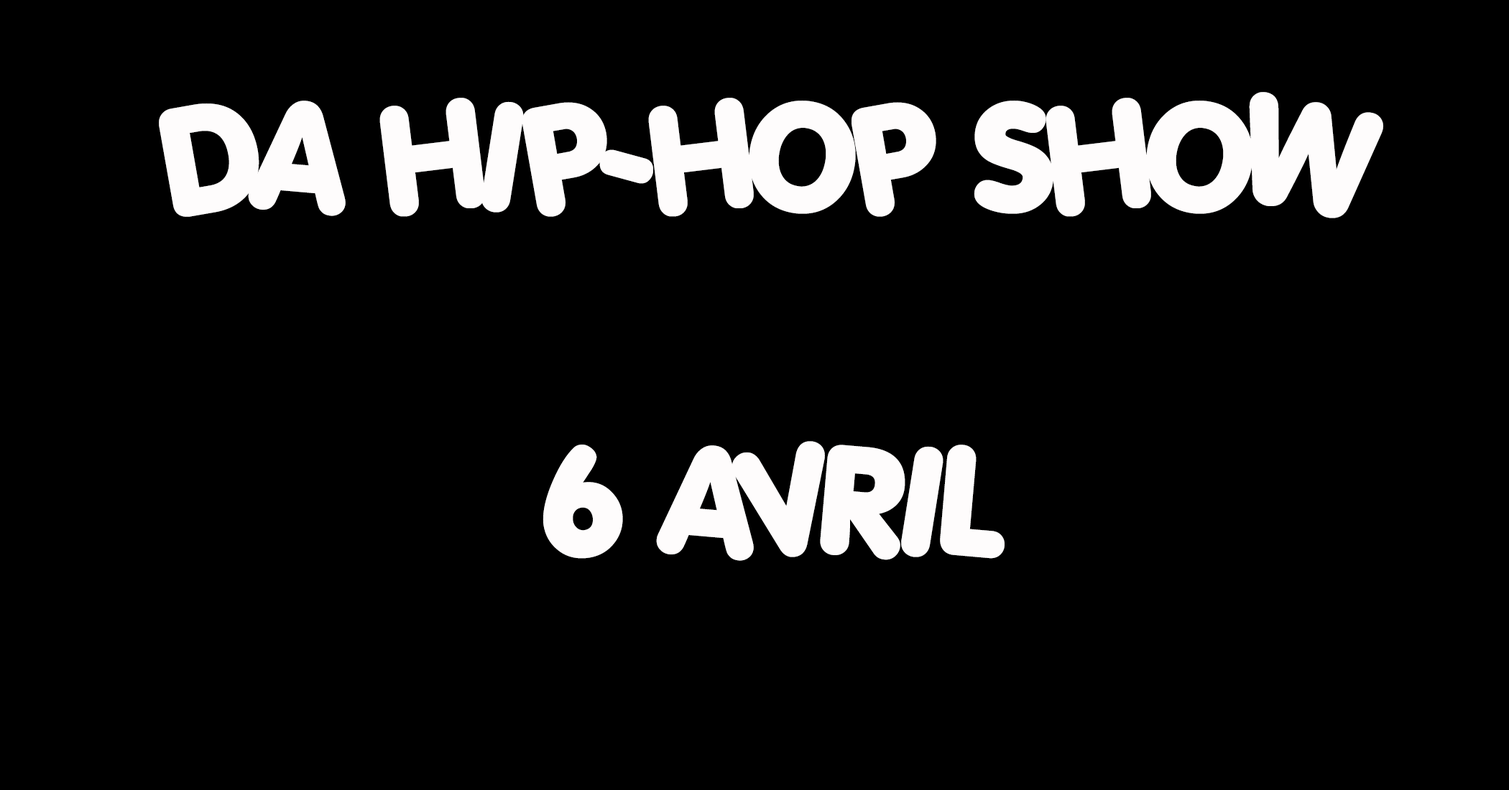
<style>
.page{position:relative;width:1509px;height:790px;background:#000000}
.page>*{position:absolute;margin:0}
.t1{font:143.7px "Porkys";color:#fefcfc}
</style>
<div class="page">
<p class="t1" style="left:159px;top:92px;width:1224px;height:469px;text-align:center">DA HIP-HOP SHOW<br><br>6 AVRIL</p>
</div>
